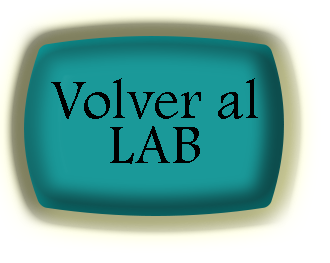
<style>
.page{position:relative;width:330px;height:263px}
.page>*{position:absolute;margin:0}
.t1{font:58.3px "FootlightMTLight";color:#000000}
</style>
<div class="page">
<p class="t1" style="left:51px;top:78px;width:207px;height:41px">Volver al</p>
<p class="t1" style="left:110px;top:126px;width:90px;height:38px">LAB</p>
</div>
